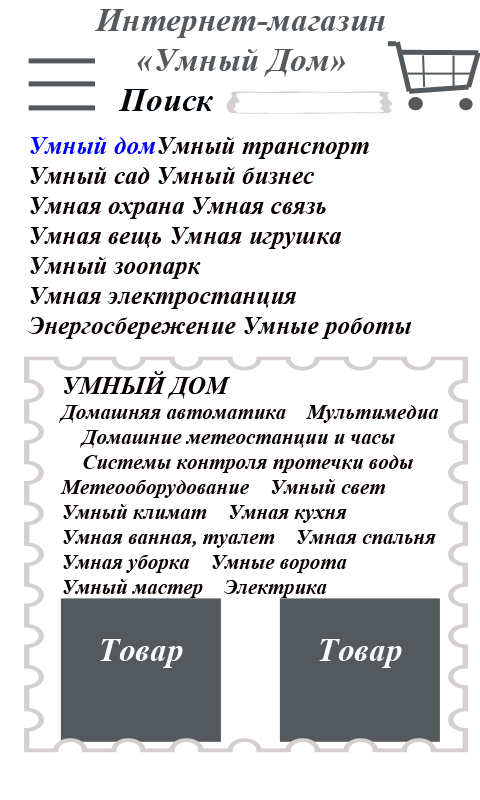
<style>
.page{position:relative;width:480px;height:800px;background:#ffffff}
.page>*{position:absolute;margin:0}
.t1{font:33.3px "TimesNewRomanPS-BoldItalicMT";color:#53595c}
.t2{font:33.3px "TimesNewRomanPS-BoldItalicMT";color:#01070b}
.t3{font:25px "TimesNewRomanPS-BoldItalicMT";color:#0b0101}
.t4{font:25px "TimesNewRomanPS-BoldItalicMT";color:#0000ff}
.t5{font:20.8px "TimesNewRomanPS-BoldItalicMT";color:#0b0101}
</style>
<div class="page">
<p class="t1" style="left:95px;top:9px;width:290px;height:68px;text-align:center">Интернет-магазин<br>«Умный Дом»</p>
<p class="t2" style="left:119px;top:89px;width:94px;height:22px">Поиск</p>
<p class="t3" style="left:28px;top:137px;width:384px;height:202px"><span class="t4">Умный дом</span>Умный транспорт<br>Умный сад Умный бизнес<br>Умная охрана Умная связь<br>Умная вещь Умная игрушка<br>Умный зоопарк <br>Умная электростанция<br>Энергосбережение Умные роботы</p>
<p class="t5" style="left:59px;top:371px;width:380px;height:227px"><span class="t3">УМНЫЙ ДОМ <br></span>Домашняя автоматика    Мультимедиа<br>    Домашние метеостанции и часы<br>    Системы контроля протечки воды<br>Метеооборудование    Умный свет    <br>Умный климат    Умная кухня    <br>Умная ванная, туалет    Умная спальня<br>Умная уборка    Умные ворота    <br>Умный мастер    Электрика</p>
</div>
